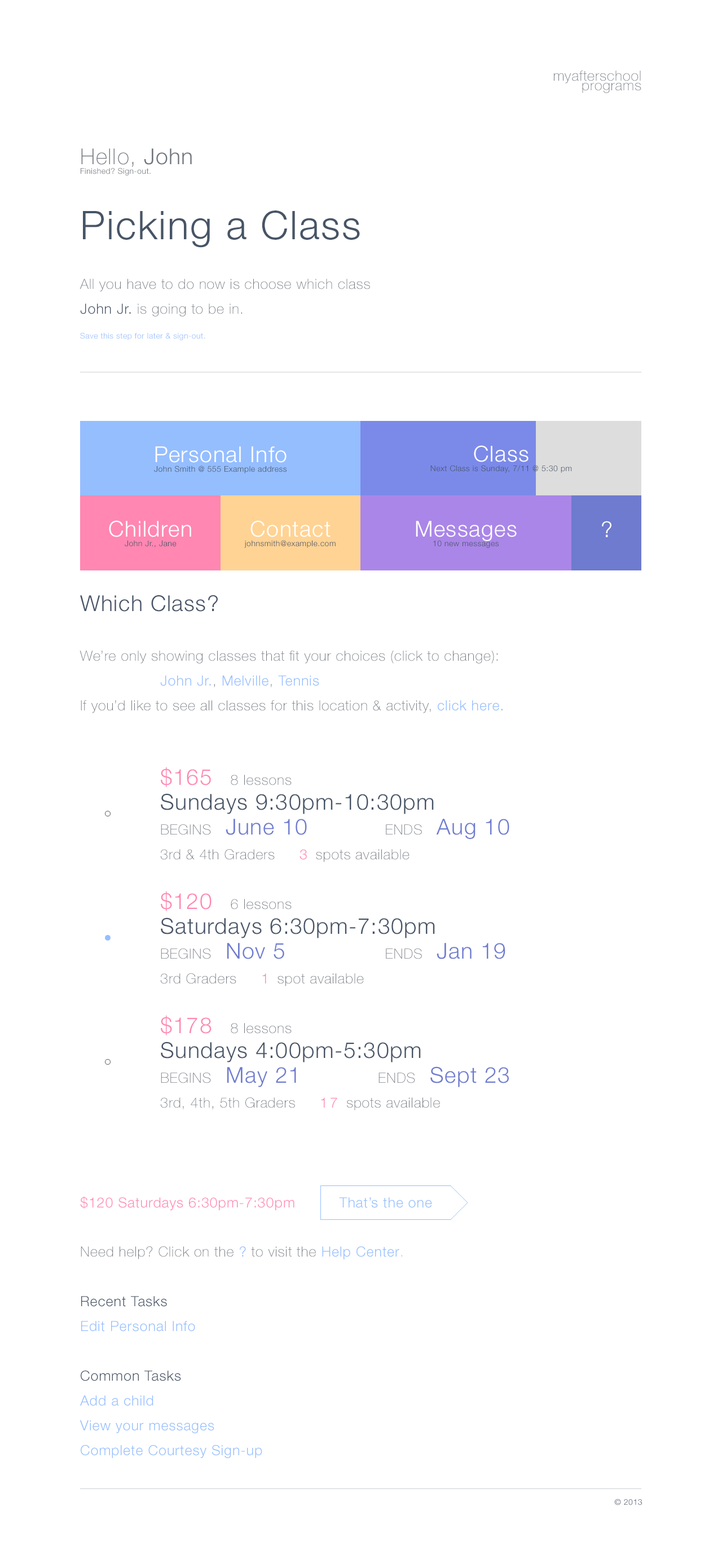
<style>
.page{position:relative;width:722px;height:1568px;background:#ffffff}
.page>*{position:absolute;margin:0}
.t1{font:14.1px/9.6px "HelveticaNeueLTStd-Th";letter-spacing:0.039em;color:#71767f}
.t2{font:7.9px/9.6px "HelveticaNeueLTStd-Lt";letter-spacing:0.039em;color:#71767f}
.t3{font:22px/9.6px "HelveticaNeueLTStd-Th";letter-spacing:0.039em;color:#71767f}
.t4{font:22px/9.6px "HelveticaNeueLTStd-Lt";letter-spacing:0.039em;color:#71767f}
.t5{font:14.1px/24.8px "HelveticaNeueLTStd-Th";letter-spacing:0.039em;color:#71767f}
.t6{font:39.5px/24.8px "HelveticaNeueLTStd-Lt";letter-spacing:0.039em;color:#475466}
.t7{font:14.1px/24.8px "HelveticaNeueLTStd-Lt";letter-spacing:0.039em;color:#475466}
.t8{font:7.9px/24.8px "HelveticaNeueLTStd-Lt";letter-spacing:0.039em;color:#95beff}
.t9{font:7.9px/9.6px "HelveticaNeueLTStd-Lt";letter-spacing:0.039em;color:#475467}
.t10{font:22px/24.8px "HelveticaNeueLTStd-Lt";letter-spacing:0.039em;color:#ffffff}
.t11{font:22px/9.6px "HelveticaNeueLTStd-Lt";letter-spacing:0.039em;color:#ffffff}
.t12{font:22px "HelveticaNeueLTStd-Lt";letter-spacing:0.039em;color:#ffffff}
.t13{font:22px "HelveticaNeueLTStd-Lt";letter-spacing:0.039em;color:#475467}
.t14{font:14.1px/24.8px "HelveticaNeueLTStd-Lt";letter-spacing:0.039em;color:#95beff}
.t15{font:22px/24.8px "HelveticaNeueLTStd-Lt";letter-spacing:0.039em;color:#475466}
.t16{font:22px/24.8px "HelveticaNeueLTStd-Lt";letter-spacing:0.039em;color:#ff87b2}
.t17{font:14.1px/24.8px "HelveticaNeueLTStd-Th";letter-spacing:0.039em;color:#71767f;text-transform:uppercase}
.t18{font:22px/24.8px "HelveticaNeueLTStd-Lt";letter-spacing:0.039em;color:#6e7bcf}
.t19{font:14.1px/24.8px "HelveticaNeueLTStd-Lt";letter-spacing:0.159em;color:#ff87b2}
.t20{font:14.1px "HelveticaNeueLTStd-Lt";letter-spacing:0.039em;color:#ff87b2}
.t21{font:14.1px "HelveticaNeueLTStd-Lt";letter-spacing:0.039em;color:#95beff}
.t22{font:14.1px/24.8px "HelveticaNeueLTStd-Th";letter-spacing:0.039em;color:#95beff}
.t23{font:14.1px/24.8px "HelveticaNeueLTStd-Lt";letter-spacing:0.039em;color:#475467}
.t24{font:7.9px "HelveticaNeueLTStd-Lt";letter-spacing:0.039em;color:#475467}
</style>
<div class="page">
<p class="t1" style="left:554px;top:71px;width:88px;height:22px;text-align:right">myafterschool<br>programs</p>
<p class="t2" style="left:81px;top:148px;width:111px;height:27px"><span class="t3">Hello, </span><span class="t4">John<br></span>Finished? Sign-out.</p>
<p class="t5" style="left:80px;top:210px;width:290px;height:130px"><span class="t6">Picking a Class<br><br></span>All you have to do now is choose which class <span class="t7">John Jr.</span> is going to be in.<br><span class="t8">Save this step for later &amp; sign-out.</span></p>
<p class="t9" style="left:154px;top:446px;width:133px;height:27px;text-align:center"><span class="t10">Personal Info<br></span>John Smith @ 555 Example address</p>
<p class="t9" style="left:109px;top:520px;width:82px;height:27px;text-align:center"><span class="t11">Children<br></span>John Jr., Jane</p>
<p class="t9" style="left:244px;top:520px;width:92px;height:28px;text-align:center"><span class="t11">Contact<br></span>johnsmith@example.com</p>
<p class="t9" style="left:416px;top:521px;width:101px;height:27px;text-align:center"><span class="t11">Messages<br></span>10 new messages</p>
<p class="t12" style="left:602px;top:521px;width:10px;height:16px">?</p>
<p class="t13" style="left:80px;top:595px;width:138px;height:17px">Which Class?</p>
<p class="t5" style="left:80px;top:651px;width:423px;height:62px">We’re only showing classes that fit your choices (click to change):<br>              <span class="t14">John Jr.</span>, <span class="t14">Melville</span>, <span class="t14">Tennis<br></span>If you’d like to see all classes for this location &amp; activity, <span class="t14">click here</span>.</p>
<p class="t15" style="left:161px;top:767px;width:349px;height:95px"><span class="t16">$165</span><span class="t5">    8 lessons<br></span>Sundays 9:30pm-10:30pm<br><span class="t17">begins</span><span class="t18">  June 10           </span><span class="t17">ends</span><span class="t18">  Aug 10<br></span><span class="t5">3rd &amp; 4th Graders     </span><span class="t19">3 </span><span class="t5">spots available</span></p>
<p class="t15" style="left:161px;top:891px;width:345px;height:95px"><span class="t16">$120</span><span class="t5">    6 lessons<br></span>Saturdays 6:30pm-7:30pm<br><span class="t17">begins</span><span class="t18">  Nov 5               </span><span class="t17">ends</span><span class="t18">  Jan 19<br></span><span class="t5">3rd Graders     </span><span class="t19">1 </span><span class="t5">spot available</span></p>
<p class="t15" style="left:161px;top:1015px;width:348px;height:95px"><span class="t16">$178</span><span class="t5">    8 lessons<br></span>Sundays 4:00pm-5:30pm<br><span class="t17">begins</span><span class="t18">  May 21           </span><span class="t17">ends</span><span class="t18">  Sept 23<br></span><span class="t5">3rd, 4th, 5th Graders     </span><span class="t19">17 </span><span class="t5">spots available</span></p>
<p class="t20" style="left:80px;top:1196px;width:215px;height:14px">$120 Saturdays 6:30pm-7:30pm</p>
<p class="t21" style="left:339px;top:1197px;width:93px;height:11px">That’s the one</p>
<p class="t14" style="left:80px;top:1246px;width:322px;height:213px"><span class="t5">Need help? Click on the </span>? <span class="t5">to visit the </span>Help Center<span class="t22">.<br><br></span><span class="t23">Recent Tasks<br></span>Edit Personal Info<br><br><span class="t23">Common Tasks<br></span>Add a child<br>View your messages<br>Complete Courtesy Sign-up</p>
<p class="t24" style="left:614px;top:1499px;width:28px;height:6px">© 2013</p>
</div>
